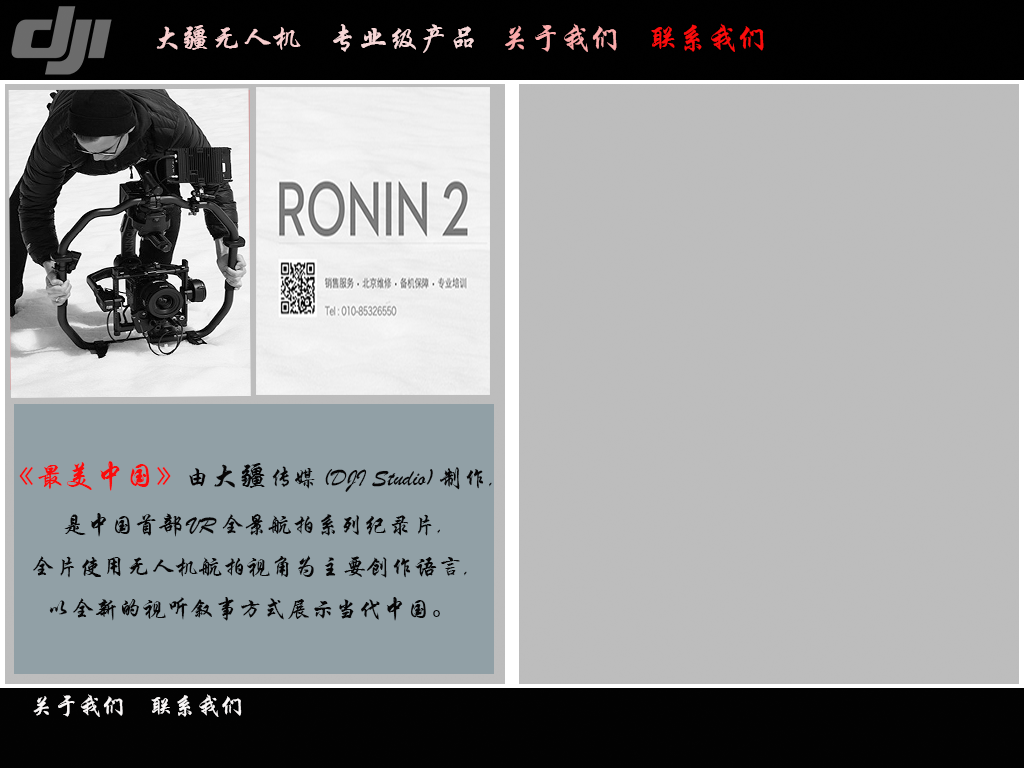
<style>
.page{position:relative;width:1024px;height:768px;background:#bdbdbd}
.page>*{position:absolute;margin:0}
.t1{font:30px "STXingkai";color:#f7cece}
.t2{font:30px "STXingkai";color:#f6d7d7}
.t3{font:30px "STXingkai";color:#fbaaaa}
.t4{font:30px "STXingkai";color:#fa0c0c}
.t5{font:24px "STXingkai";color:#060505}
.t6{font:24px "STXingkai";color:#040101}
.t7{font:30px "STXingkai";color:#060505}
.t8{font:24px "STXingkai";color:#faf7f7}
</style>
<div class="page">
<p class="t1" style="left:156px;top:25px;width:145px;height:25px">大疆无人机</p>
<p class="t2" style="left:333px;top:24px;width:141px;height:29px">专业级产品</p>
<p class="t3" style="left:505px;top:23px;width:112px;height:29px">关于我们</p>
<p class="t4" style="left:651px;top:23px;width:113px;height:29px">联系我们</p>
<p class="t5" style="left:19px;top:461px;width:473px;height:160px;text-align:center"><span class="t4">《最美中国》</span><span class="t6">由</span><span class="t7">大疆</span>传媒 (DJI Studio) 制作,<br> 是中国首部 VR 全景航拍系列纪录片,<br>全片使用无人机航拍视角为主要创作语言,<br>以全新的视听叙事方式展示当代中国。</p>
<p class="t8" style="left:33px;top:694px;width:90px;height:23px">关于我们</p>
<p class="t8" style="left:151px;top:694px;width:91px;height:23px">联系我们</p>
</div>
